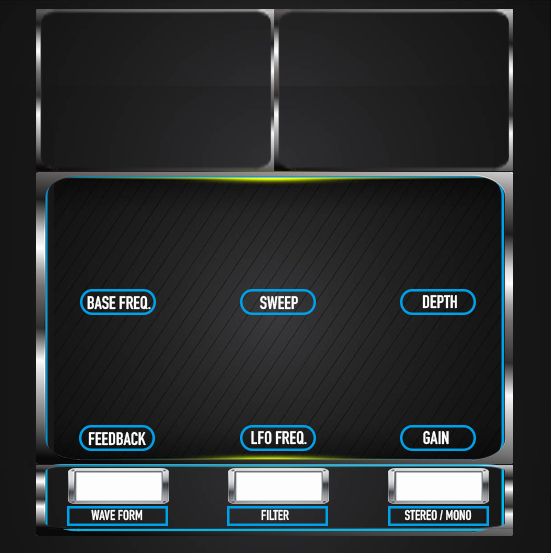
<style>
.page{position:relative;width:551px;height:553px}
.page>*{position:absolute;margin:0}
.t1{font:18px "DINCondensed-Bold";color:#ffffff;text-transform:uppercase}
.t2{font:14px "DINCondensed-Bold";color:#ffffff;text-transform:uppercase}
</style>
<div class="page">
<p class="t1" style="left:87px;top:295px;width:64px;height:15px">Base Freq.</p>
<p class="t1" style="left:260px;top:295px;width:38px;height:15px">Sweep</p>
<p class="t1" style="left:422px;top:295px;width:35px;height:14px">DEPTH</p>
<p class="t1" style="left:88px;top:431px;width:58px;height:15px">Feedback</p>
<p class="t1" style="left:251px;top:431px;width:56px;height:14px">LFO Freq.</p>
<p class="t1" style="left:423px;top:430px;width:26px;height:15px">gain</p>
<p class="t2" style="left:91px;top:509px;width:52px;height:12px">wave form</p>
<p class="t2" style="left:261px;top:509px;width:28px;height:12px">filter</p>
<p class="t2" style="left:404px;top:509px;width:68px;height:12px">stereo / mono</p>
</div>
